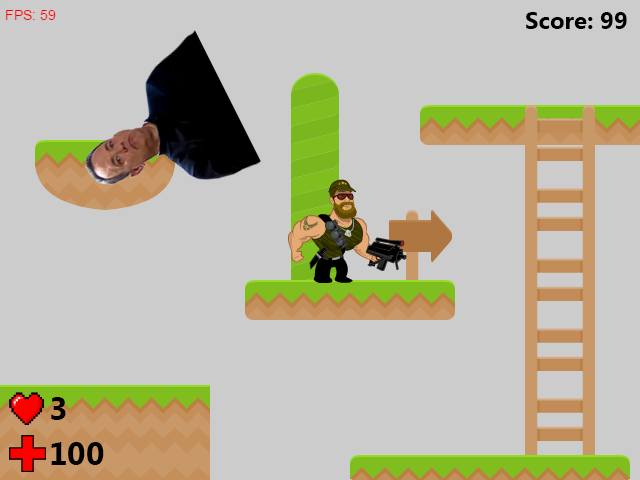
<style>
.page{position:relative;width:640px;height:480px;background:#cccccc}
.page>*{position:absolute;margin:0}
.t1{font:24px "KhmerUI-Bold";color:#000000}
.t2{font:32px "KhmerUI-Bold";color:#000000}
</style>
<div class="page">
<p class="t1" style="left:526px;top:12px;width:101px;height:17px">Score: 99</p>
<p class="t2" style="left:51px;top:397px;width:15px;height:23px">3</p>
<p class="t2" style="left:51px;top:442px;width:53px;height:23px">100</p>
</div>
